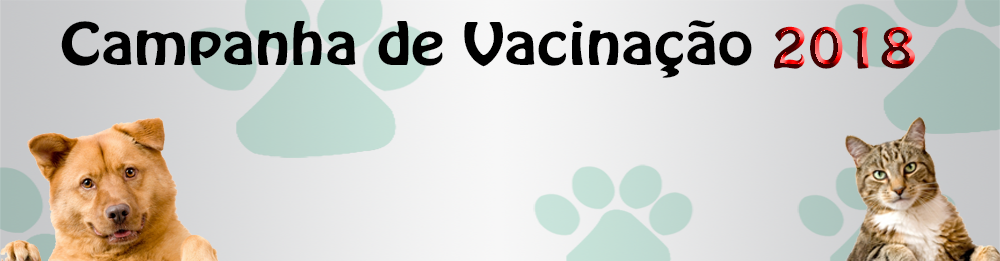
<style>
.page{position:relative;width:1000px;height:261px}
.page>*{position:absolute;margin:0}
.t1{font:51.6px "HoboStd";color:#000000;scale:1.24 1}
.t2{font:49.8px "HoboStd";scale:1.26 1}
</style>
<div class="page">
<p class="t1" style="left:61px;top:20px;width:691px;height:58px">Campanha de Vacinação</p>
<p class="t2" style="left:774px;top:26px;width:141px;height:43px">2018</p>
</div>
